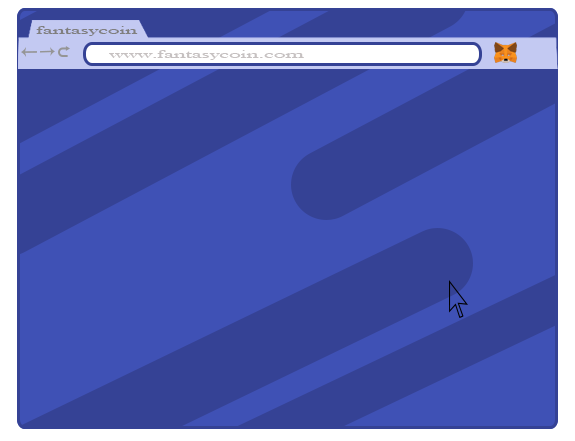
<style>
.page{position:relative;width:575px;height:441px;background:#3f51b5}
.page>*{position:absolute;margin:0}
.t1{font:12.4px "BaskOldFace";color:#807f7f;scale:1.86 1}
.t2{font:12.4px "BaskOldFace";color:#c6c1c1;scale:1.86 1}
</style>
<div class="page">
<p class="t1" style="left:36px;top:26px;width:102px;height:10px">fantasycoin</p>
<p class="t2" style="left:109px;top:50px;width:195px;height:10px">www.fantasycoin.com</p>
</div>
